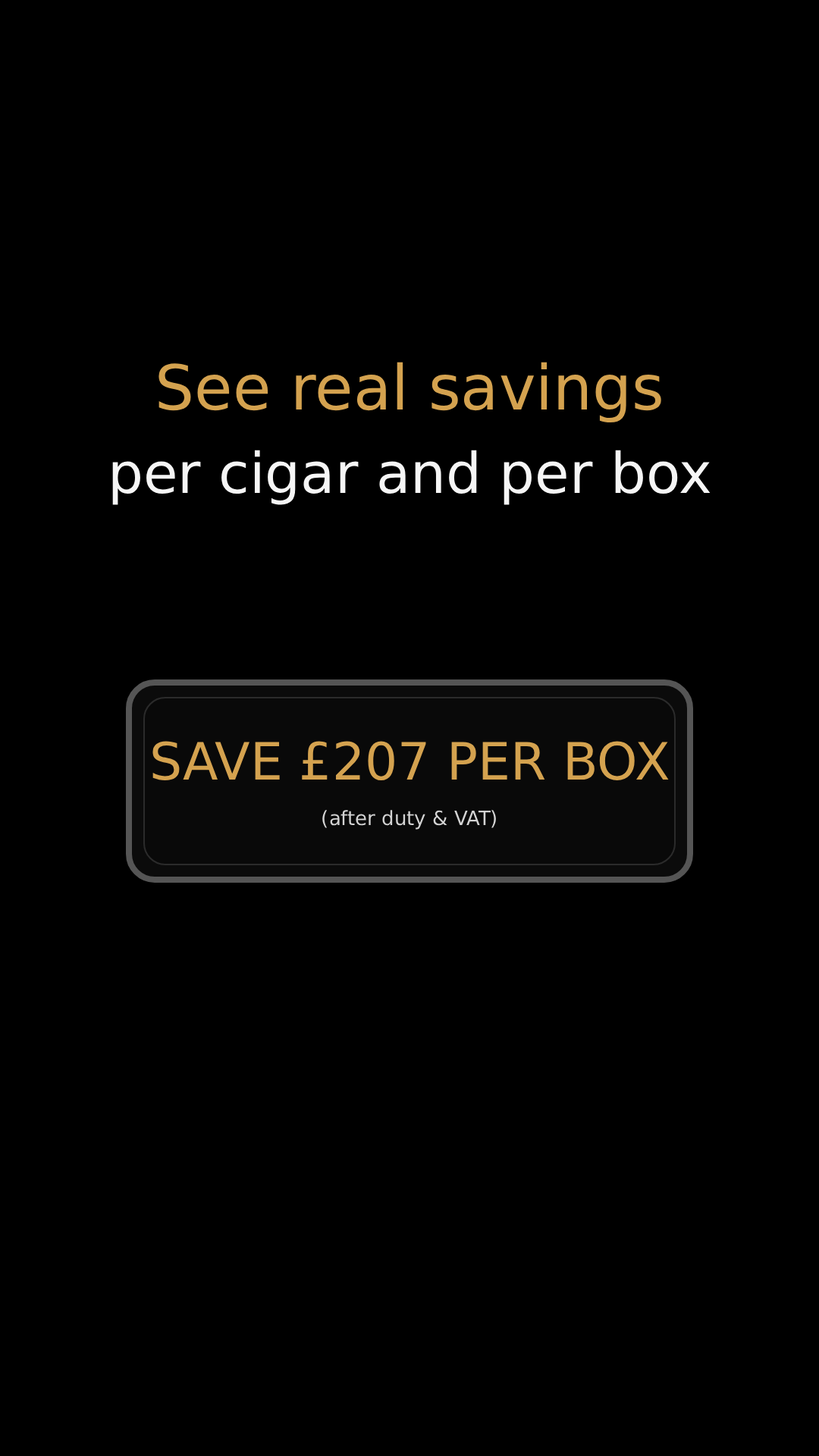
<style>
.page{position:relative;width:819px;height:1456px;background:#000000}
.page>*{position:absolute;margin:0}
.t1{font:62.2px "Arial";color:#d4a24f}
.t2{font:56.1px "Arial";color:#f6f6f6}
.t3{font:51.6px "Arial";color:#d4a24f}
.t4{font:19.7px "Arial";color:#d3d3d3}
</style>
<div class="page">
<p class="t1" style="left:158px;top:362px;width:503px;height:61px">See real savings</p>
<p class="t2" style="left:112px;top:450px;width:599px;height:55px">per cigar and per box</p>
<p class="t3" style="left:152px;top:741px;width:517px;height:39px">SAVE £207 PER BOX</p>
<p class="t4" style="left:322px;top:810px;width:174px;height:20px">(after duty &amp; VAT)</p>
</div>
